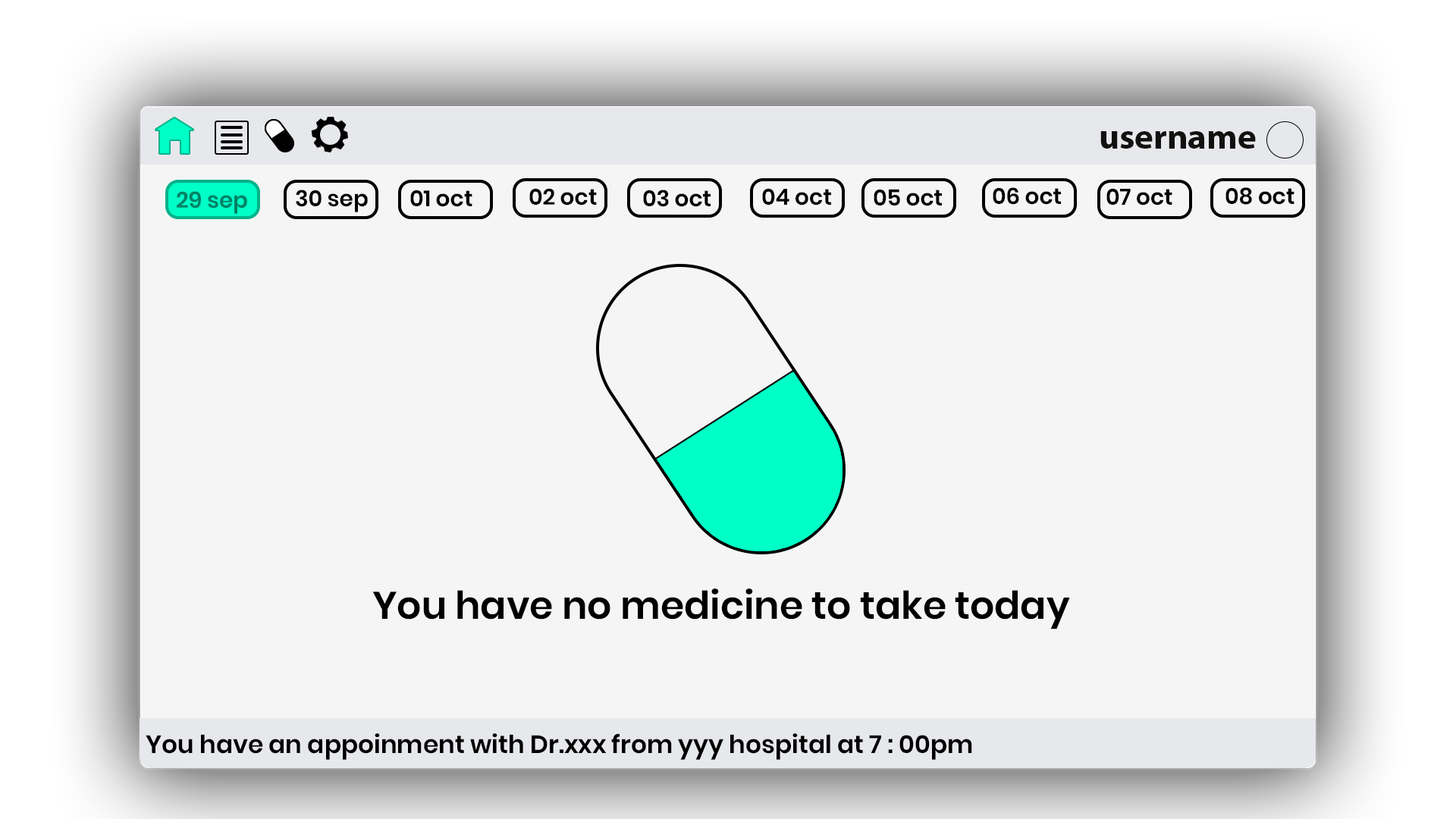
<style>
.page{position:relative;width:1456px;height:819px;background:#f5f5f5}
.page>*{position:absolute;margin:0}
.t1{font:35.6px "MyriadPro-Bold";color:#12110f}
.t2{font:22.4px "Poppins-SemiBold";color:#008265}
.t3{font:22.4px "Poppins-SemiBold";color:#000000}
.t4{font:38.3px "Poppins-SemiBold";color:#000000}
.t5{font:24.9px "Poppins-SemiBold";color:#000000}
</style>
<div class="page">
<p class="t1" style="left:1100px;top:131px;width:156px;height:18px">username</p>
<p class="t2" style="left:177px;top:191px;width:70px;height:23px">29 sep</p>
<p class="t3" style="left:296px;top:190px;width:72px;height:22px">30 sep</p>
<p class="t3" style="left:410px;top:190px;width:62px;height:17px">01 oct</p>
<p class="t3" style="left:529px;top:188px;width:68px;height:18px">02 oct</p>
<p class="t3" style="left:643px;top:190px;width:68px;height:17px">03 oct</p>
<p class="t3" style="left:762px;top:188px;width:69px;height:18px">04 oct</p>
<p class="t3" style="left:874px;top:189px;width:68px;height:17px">05 oct</p>
<p class="t3" style="left:993px;top:187px;width:68px;height:18px">06 oct</p>
<p class="t3" style="left:1106px;top:188px;width:66px;height:18px">07 oct</p>
<p class="t3" style="left:1225px;top:187px;width:69px;height:18px">08 oct</p>
<p class="t4" style="left:372px;top:588px;width:698px;height:41px">You have no medicine to take today</p>
<p class="t5" style="left:146px;top:733px;width:826px;height:27px">You have an appoinment with Dr.xxx from yyy hospital at 7 : 00pm</p>
</div>
